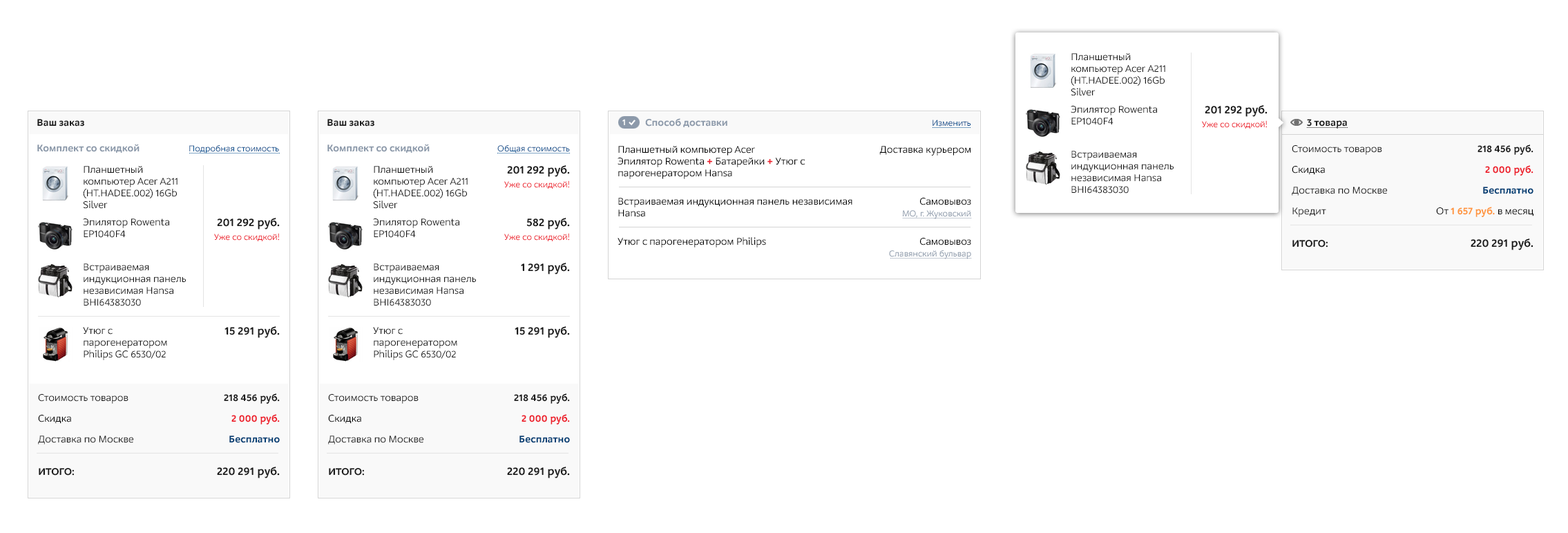
<style>
.page{position:relative;width:1568px;height:533px;background:#ffffff}
.page>*{position:absolute;margin:0}
.t1{font:10.4px/11.7px "M.Video-Regular";color:#1b1b1b}
.t2{font:11.7px "M.Video-Bold";color:#1b1b1b}
.t3{font:10.4px "M.Video-Bold";color:#1b1b1b}
.t4{font:9px "M.Video-Bold";color:#ffffff}
.t5{font:10.4px "M.Video-Bold";color:#8c99aa}
.t6{font:9px "M.Video-Regular";color:#004b8c}
.t7{font:9px "M.Video-Regular";color:#ed1c29}
.t8{font:10.4px/11.7px "M.Video-Regular";color:#000000}
.t9{font:10.4px/11.7px "M.Video-Bold";color:#ed1c29}
.t10{font:10.4px "M.Video-Regular";color:#000000}
.t11{font:10.4px/20.7px "M.Video-Regular";color:#1b1b1b}
.t12{font:10.4px/20.7px "M.Video-Regular";color:#000000}
.t13{font:10.4px/32.5px "M.Video-Bold";color:#1b1b1b}
.t14{font:10.4px/20.7px "M.Video-Bold";color:#1b1b1b}
.t15{font:10.4px/20.7px "M.Video-Bold";color:#ed1c29}
.t16{font:10.4px/20.7px "M.Video-Bold";color:#003e74}
.t17{font:10.4px/20.7px "M.Video-Bold";color:#ff953c}
.t18{font:11.7px/32.5px "M.Video-Bold";color:#1b1b1b}
.t19{font:9px "M.Video-Regular";color:#8c99aa}
</style>
<div class="page">
<p class="t1" style="left:1071px;top:53px;width:94px;height:43px">Планшетный компьютер Acer A211 (HT.HADEE.002) 16Gb Silver</p>
<p class="t1" style="left:1071px;top:106px;width:86px;height:19px">Эпилятор Rowenta EP1040F4</p>
<p class="t2" style="left:1205px;top:105px;width:63px;height:12px">201 292 руб.</p>
<p class="t3" style="left:37px;top:119px;width:47px;height:7px">Ваш заказ</p>
<p class="t3" style="left:327px;top:119px;width:47px;height:7px">Ваш заказ</p>
<p class="t4" style="left:622px;top:119px;width:3px;height:6px">1</p>
<p class="t5" style="left:645px;top:118px;width:82px;height:9px">Способ доставки</p>
<p class="t6" style="left:933px;top:119px;width:38px;height:7px">Изменить</p>
<p class="t7" style="left:1202px;top:120px;width:65px;height:8px">Уже со скидкой!</p>
<p class="t3" style="left:1307px;top:119px;width:40px;height:9px">3 товара</p>
<p class="t5" style="left:37px;top:144px;width:103px;height:9px">Комплект со скидкой</p>
<p class="t6" style="left:189px;top:144px;width:90px;height:10px">Подробная стоимость</p>
<p class="t5" style="left:327px;top:144px;width:103px;height:9px">Комплект со скидкой</p>
<p class="t6" style="left:497px;top:144px;width:73px;height:9px">Общая стоимость</p>
<p class="t8" style="left:618px;top:146px;width:187px;height:33px">Планшетный компьютер Acer<br>Эпилятор Rowenta <span class="t9">+</span> Батарейки <span class="t9">+</span> Утюг с<br>парогенератором Hansa</p>
<p class="t10" style="left:879px;top:146px;width:92px;height:9px">Доставка курьером</p>
<p class="t11" style="left:1292px;top:145px;width:95px;height:102px">Стоимость товаров<br><span class="t12">Скидка<br></span>Доставка по Москве<br>Кредит<br><span class="t13">ИТОГО:</span></p>
<p class="t14" style="left:1436px;top:144px;width:97px;height:106px;text-align:right">218 456 руб.<br><span class="t15">2 000 руб.<br></span><span class="t16">Бесплатно<br></span><span class="t12">От </span><span class="t17">1 657 руб. </span><span class="t12">в месяц<br></span><span class="t18">220 291 руб.</span></p>
<p class="t1" style="left:1071px;top:151px;width:103px;height:42px">Встраиваемая индукционная панель независимая Hansa BHI64383030</p>
<p class="t1" style="left:83px;top:166px;width:95px;height:43px">Планшетный компьютер Acer A211 (HT.HADEE.002) 16Gb Silver</p>
<p class="t1" style="left:373px;top:166px;width:95px;height:43px">Планшетный компьютер Acer A211 (HT.HADEE.002) 16Gb Silver</p>
<p class="t2" style="left:507px;top:165px;width:63px;height:12px">201 292 руб.</p>
<p class="t7" style="left:504px;top:180px;width:65px;height:9px">Уже со скидкой!</p>
<p class="t8" style="left:618px;top:198px;width:234px;height:19px">Встраиваемая индукционная панель независимая<br>Hansa</p>
<p class="t10" style="left:920px;top:198px;width:51px;height:7px">Самовывоз</p>
<p class="t19" style="left:903px;top:210px;width:68px;height:9px">МО, г. Жуковский</p>
<p class="t1" style="left:83px;top:218px;width:86px;height:20px">Эпилятор Rowenta EP1040F4</p>
<p class="t2" style="left:217px;top:218px;width:63px;height:11px">201 292 руб.</p>
<p class="t1" style="left:373px;top:218px;width:86px;height:20px">Эпилятор Rowenta EP1040F4</p>
<p class="t2" style="left:526px;top:218px;width:44px;height:11px">582 руб.</p>
<p class="t7" style="left:214px;top:233px;width:65px;height:8px">Уже со скидкой!</p>
<p class="t7" style="left:504px;top:233px;width:65px;height:8px">Уже со скидкой!</p>
<p class="t10" style="left:618px;top:237px;width:148px;height:10px">Утюг с парогенератором Philips</p>
<p class="t10" style="left:920px;top:238px;width:51px;height:7px">Самовывоз</p>
<p class="t19" style="left:889px;top:249px;width:82px;height:10px">Славянский бульвар</p>
<p class="t1" style="left:84px;top:263px;width:102px;height:43px">Встраиваемая индукционная панель независимая Hansa BHI64383030</p>
<p class="t1" style="left:374px;top:263px;width:102px;height:43px">Встраиваемая индукционная панель независимая Hansa BHI64383030</p>
<p class="t2" style="left:521px;top:262px;width:49px;height:12px">1 291 руб.</p>
<p class="t1" style="left:83px;top:327px;width:84px;height:33px">Утюг с парогенератором Philips GC 6530/02</p>
<p class="t2" style="left:224px;top:326px;width:56px;height:12px">15 291 руб.</p>
<p class="t1" style="left:373px;top:327px;width:84px;height:33px">Утюг с парогенератором Philips GC 6530/02</p>
<p class="t2" style="left:515px;top:326px;width:55px;height:12px">15 291 руб.</p>
<p class="t11" style="left:38px;top:394px;width:95px;height:81px">Стоимость товаров<br><span class="t12">Скидка<br></span>Доставка по Москве<br><span class="t13">ИТОГО:</span></p>
<p class="t14" style="left:217px;top:393px;width:63px;height:85px;text-align:right">218 456 руб.<br><span class="t15">2 000 руб.<br></span><span class="t16">Бесплатно<br></span><span class="t18">220 291 руб.</span></p>
<p class="t11" style="left:328px;top:394px;width:95px;height:81px">Стоимость товаров<br><span class="t12">Скидка<br></span>Доставка по Москве<br><span class="t13">ИТОГО:</span></p>
<p class="t14" style="left:507px;top:393px;width:63px;height:85px;text-align:right">218 456 руб.<br><span class="t15">2 000 руб.<br></span><span class="t16">Бесплатно<br></span><span class="t18">220 291 руб.</span></p>
</div>
